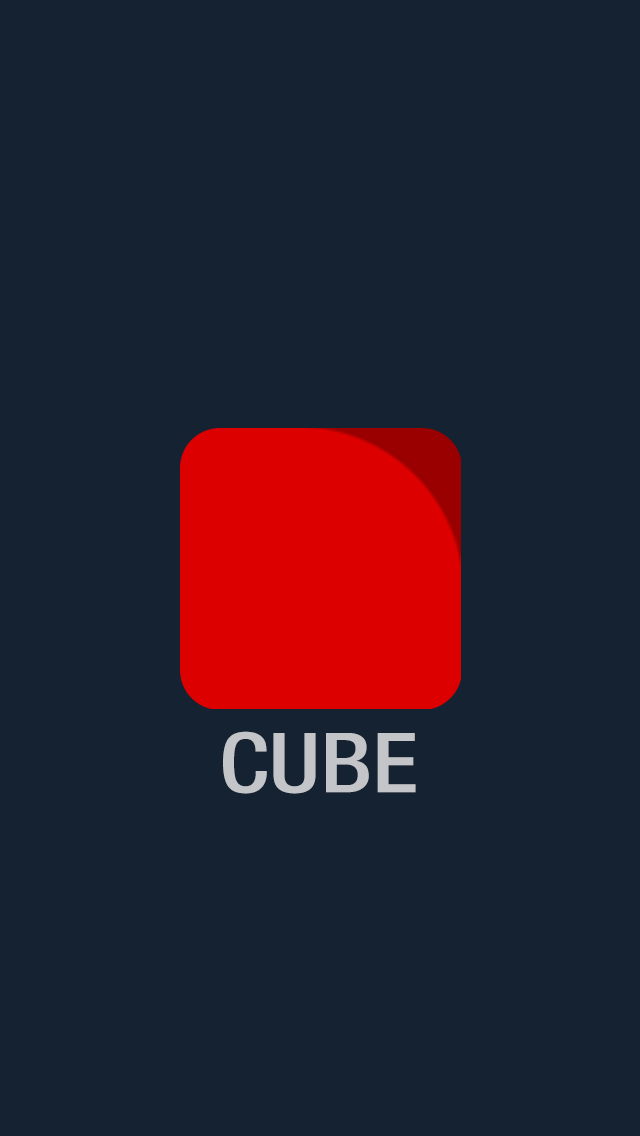
<style>
.page{position:relative;width:640px;height:1136px;background:#152232}
.page>*{position:absolute;margin:0}
.t1{font:83.1px "Helvetica67-CondensedMedium";color:#c4c5c8;scale:1.16 1}
</style>
<div class="page">
<p class="t1" style="left:223px;top:731px;width:193px;height:63px">CUBE</p>
</div>
